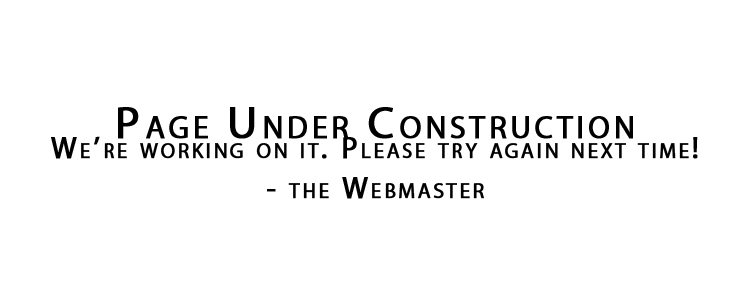
<style>
.page{position:relative;width:750px;height:300px;background:#ffffff}
.page>*{position:absolute;margin:0}
.t1{font:30px/20px "MyriadPro-Regular";letter-spacing:0.1em;color:#000000;font-variant:small-caps;font-weight:bold}
.t2{font:25px/20px "MyriadPro-Regular";letter-spacing:0.1em;color:#ffffff;font-weight:bold}
.t3{font:45px/20px "MyriadPro-Regular";letter-spacing:0.1em;color:#000000;font-variant:small-caps;font-weight:bold}
</style>
<div class="page">
<p class="t1" style="left:51px;top:107px;width:647px;height:92px;text-align:center"><span class="t2"><br><br><br><br><br><br></span><span class="t3">Page Under Construction<br></span>We’re working on it. Please try again next time!<br><br>- the Webmaster</p>
</div>
